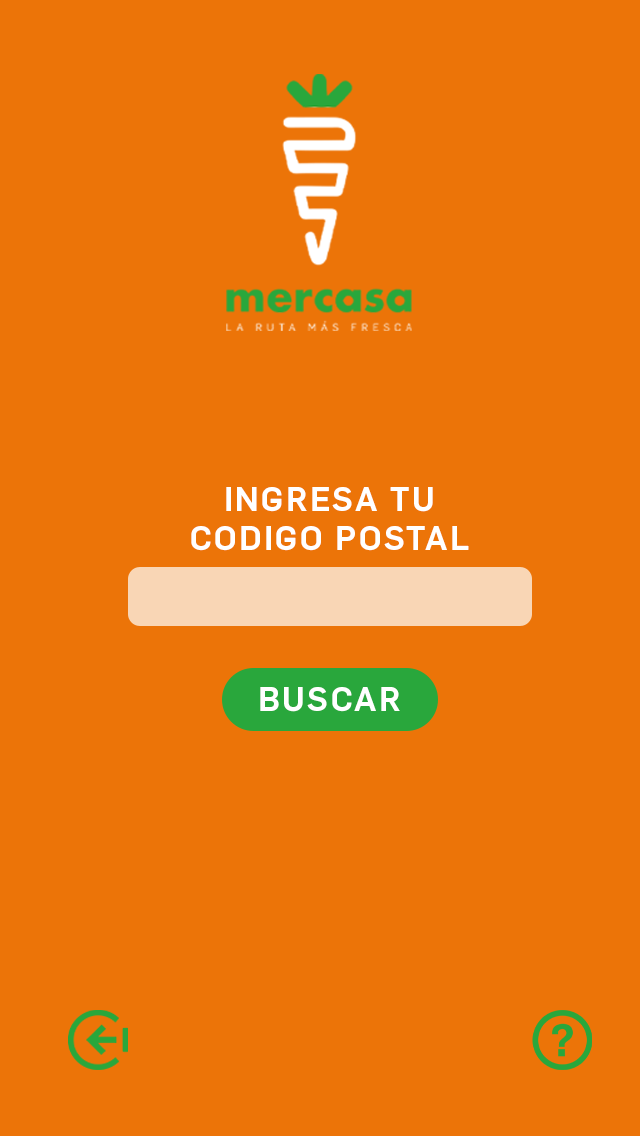
<style>
.page{position:relative;width:640px;height:1136px;background:#ec7408}
.page>*{position:absolute;margin:0}
.t1{font:33px "Flama-Medium";letter-spacing:0.075em;color:#ffffff}
</style>
<div class="page">
<p class="t1" style="left:191px;top:487px;width:278px;height:64px;text-align:center">INGRESA TU<br>CODIGO POSTAL</p>
<p class="t1" style="left:260px;top:687px;width:140px;height:25px">BUSCAR</p>
</div>
